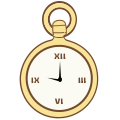
<style>
.page{position:relative;width:120px;height:120px;background:#ffffff}
.page>*{position:absolute;margin:0}
.t1{font:6.9px "aAmongYou";letter-spacing:0.025em;color:#724b2c}
</style>
<div class="page">
<p class="t1" style="left:54px;top:53px;width:12px;height:7px">XII</p>
<p class="t1" style="left:31px;top:77px;width:9px;height:7px">iX</p>
<p class="t1" style="left:78px;top:77px;width:8px;height:7px">iii</p>
<p class="t1" style="left:55px;top:98px;width:8px;height:7px">Vi</p>
</div>
